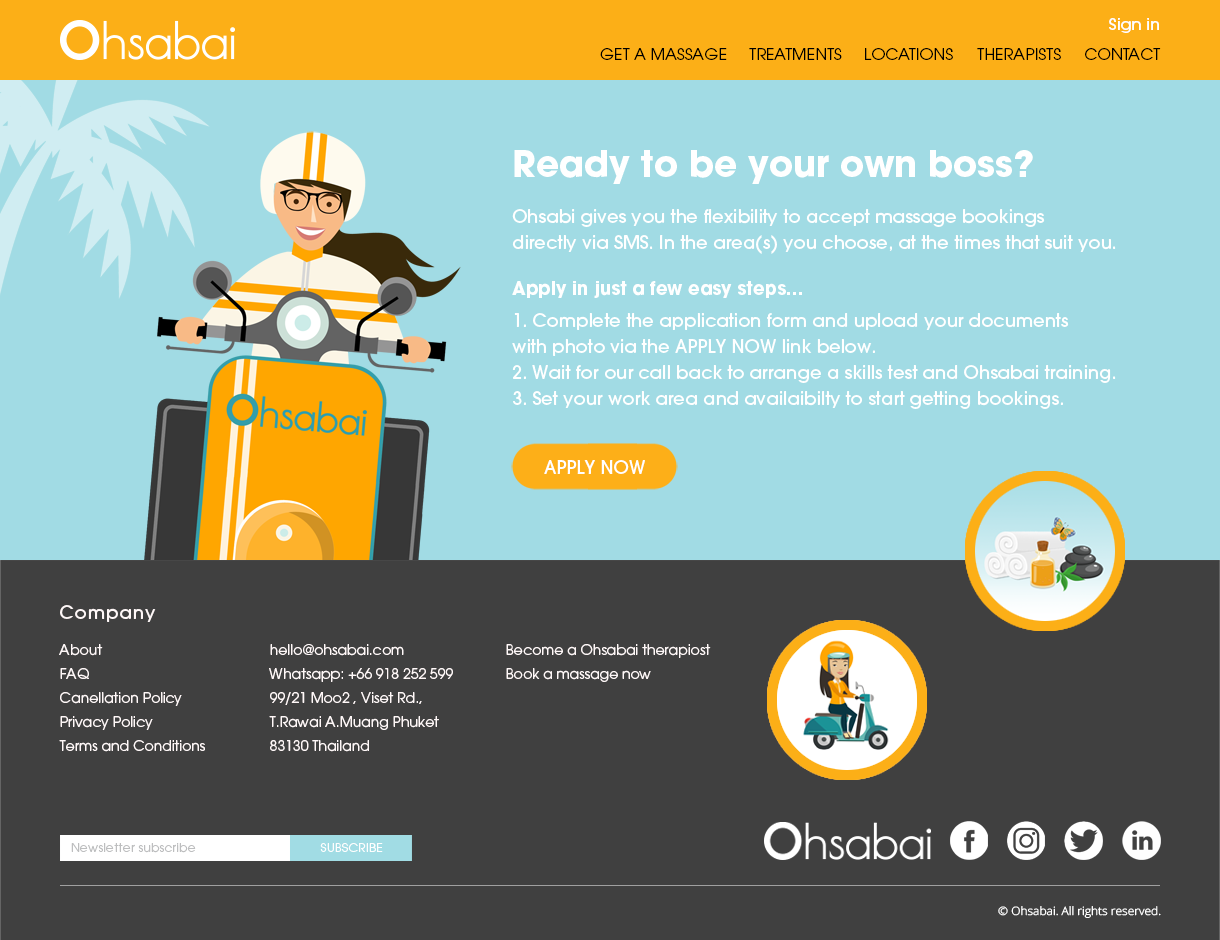
<style>
.page{position:relative;width:1220px;height:940px;background:#a1dbe4}
.page>*{position:absolute;margin:0}
.t1{font:15.2px "ITCAvantGardePro-Md";color:#ffffff;scale:1.05 1}
.t2{font:15.2px "ITCAvantGardePro-Bk";color:#000000;scale:1.05 1}
.t3{font:18px/26px "ITCAvantGardePro-Md";color:#ffffff}
.t4{font:36px/38.9px "ITCAvantGardePro-Bold";color:#ffffff}
.t5{font:18px/28px "ITCAvantGardePro-Md";color:#ffffff}
.t6{font:18px/28px "ITCAvantGardePro-Bold";color:#ffffff}
.t7{font:18px/32px "ITCAvantGardePro-Md";color:#ffffff}
.t8{font:18px "ITCAvantGardePro-Md";color:#ffffff}
.t9{font:14px/24px "ITCAvantGardePro-Bk";color:#fff8f8}
.t10{font:18px/24px "ITCAvantGardePro-Md";letter-spacing:0.05em;color:#fff8f8}
.t11{font:14px/36px "ITCAvantGardePro-Bk";color:#fff8f8}
.t12{font:12px "ITCAvantGardePro-Bk";letter-spacing:0.025em;color:#bdbebf}
.t13{font:12px "ITCAvantGardePro-Bk";letter-spacing:0.025em;color:#fefefe}
.t14{font:11.4px "OpenSans-Light";color:#ffffff;scale:1.05 1}
</style>
<div class="page">
<p class="t1" style="left:1109px;top:18px;width:50px;height:15px">Sign in</p>
<p class="t2" style="left:600px;top:48px;width:127px;height:12px">GET A MASSAGE</p>
<p class="t2" style="left:749px;top:48px;width:204px;height:12px">TREATMENTS     LOCATIONS</p>
<p class="t2" style="left:977px;top:48px;width:84px;height:12px">THERAPISTS</p>
<p class="t2" style="left:1085px;top:48px;width:76px;height:12px">CONTACT</p>
<p class="t3" style="left:512px;top:150px;width:604px;height:259px"><span class="t4">Ready to be your own boss? <br><br></span><span class="t5">0hsabi gives you the flexibility to accept massage bookings <br></span>directly via SMS. In the area(s) you choose, at the times that suit you.<br><br><span class="t6">Apply in just a few easy steps...<br></span><span class="t7">1. Complete the application form and upload your documents <br></span>with photo via the APPLY NOW link below.<br>2. Wait for our call back to arrange a skills test and Ohsabai training.<br>3. Set your work area and availaibilty to start getting bookings.</p>
<p class="t8" style="left:544px;top:460px;width:101px;height:14px">APPLY NOW</p>
<p class="t9" style="left:59px;top:605px;width:146px;height:147px;text-align:justify"><span class="t10">Company<br></span><span class="t11">About<br></span>FAQ<br>Canellation Policy<br>Privacy Policy<br>Terms and Conditions</p>
<p class="t9" style="left:269px;top:644px;width:184px;height:108px;text-align:justify"><span class="t10"> </span><span class="t11"><br>hello@ohsabai.com<br></span>Whatsapp: +66 918 252 599<br>99/21 Moo2 , Viset Rd., <br>T.Rawai A.Muang Phuket <br>83130 Thailand</p>
<p class="t11" style="left:506px;top:644px;width:205px;height:38px;text-align:justify"><span class="t10"> <br></span>Become a Ohsabai therapiost<span class="t9"><br>Book a massage now</span></p>
<p class="t12" style="left:71px;top:843px;width:125px;height:10px">Newsletter subscribe</p>
<p class="t13" style="left:320px;top:843px;width:63px;height:9px">SUBSCRIBE</p>
<p class="t14" style="left:998px;top:906px;width:163px;height:12px">© Ohsabai. All rights reserved.</p>
</div>
